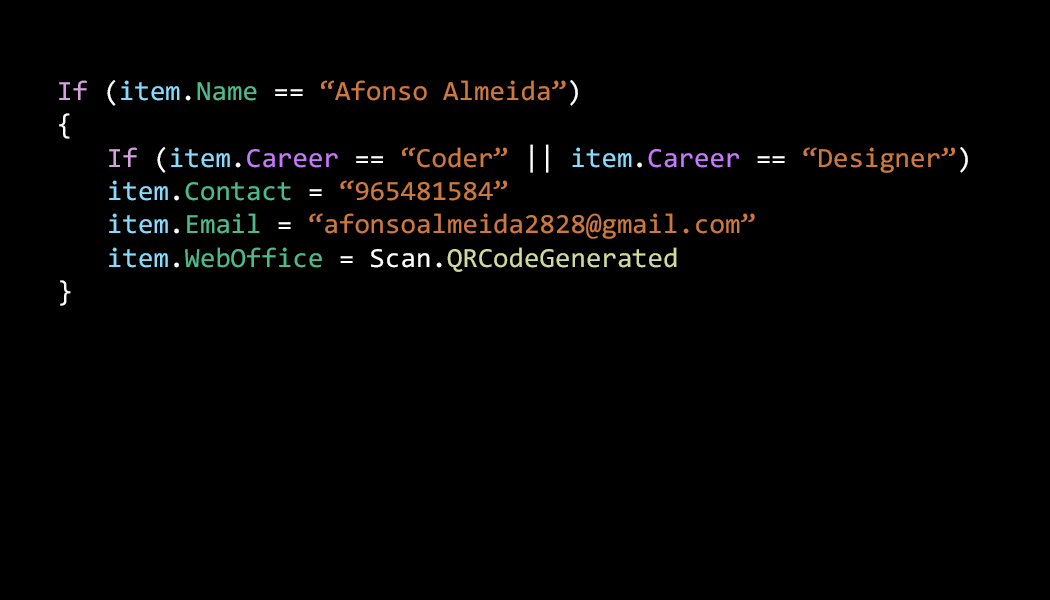
<style>
.page{position:relative;width:1050px;height:600px;background:#000000}
.page>*{position:absolute;margin:0}
.t1{font:27.8px "Consolas";color:#cf783e}
.t2{font:27.8px "Consolas";color:#d7a0df}
.t3{font:27.8px "Consolas";color:#ffffff}
.t4{font:27.8px "Consolas";color:#86dcfe}
.t5{font:27.8px "Consolas";color:#4cbb8b}
.t6{font:27.8px "Consolas";color:#c778fe}
.t7{font:27.8px "Consolas";color:#d0dc9e}
</style>
<div class="page">
<p class="t1" style="left:59px;top:80px;width:909px;height:226px"><span class="t2">If</span><span class="t3"> (</span><span class="t4">item</span><span class="t3">.</span><span class="t5">Name </span><span class="t3">== </span>“Afonso Almeida”<span class="t3">) <br>{<br> </span><span class="t2">If </span><span class="t3">(</span><span class="t4">item</span><span class="t3">.</span><span class="t6">Career</span><span class="t3"> == </span>“Coder”<span class="t3"> || </span><span class="t4">item</span><span class="t3">.</span><span class="t6">Career </span><span class="t3">== </span>“Designer”<span class="t3">)<br> </span><span class="t4">item</span><span class="t3">.</span><span class="t5">Contact </span><span class="t3">= </span>“965481584”<br> <span class="t4">item</span><span class="t3">.</span><span class="t5">Email </span><span class="t3">= </span>“afonsoalmeida2828@gmail.com”<br> <span class="t4">item</span><span class="t3">.</span><span class="t5">WebOffice </span><span class="t3">= Scan.</span><span class="t7">QRCodeGenerated<br></span><span class="t3">}</span></p>
</div>
